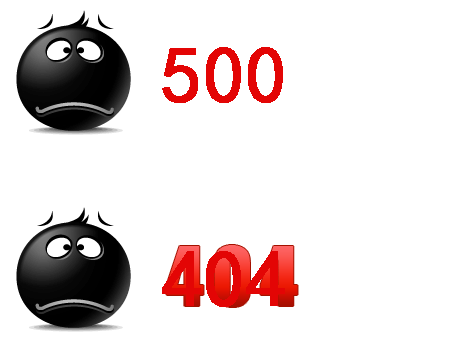
<style>
.page{position:relative;width:454px;height:340px;background:#ffffff}
.page>*{position:absolute;margin:0}
.t1{font:80px "SimHei";color:#e30505;font-weight:bold}
</style>
<div class="page">
<p class="t1" style="left:162px;top:47px;width:121px;height:56px">500</p>
<p class="t1" style="left:162px;top:251px;width:123px;height:56px">404</p>
</div>
